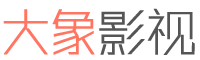
<style>
.page{position:relative;width:200px;height:60px;background:#ffffff}
.page>*{position:absolute;margin:0}
.t1{font:55px "REEJI-ZhanghaiShanRuiXian-GB1.0";color:#ff7562;font-weight:bold;scale:0.91 1}
.t2{font:55px "REEJI-ZhanghaiShanRuiXian-GB1.0";color:#555555;font-weight:bold;scale:0.91 1}
</style>
<div class="page">
<p class="t1" style="left:3px;top:8px;width:192px;height:47px">大象<span class="t2">影视</span></p>
</div>
